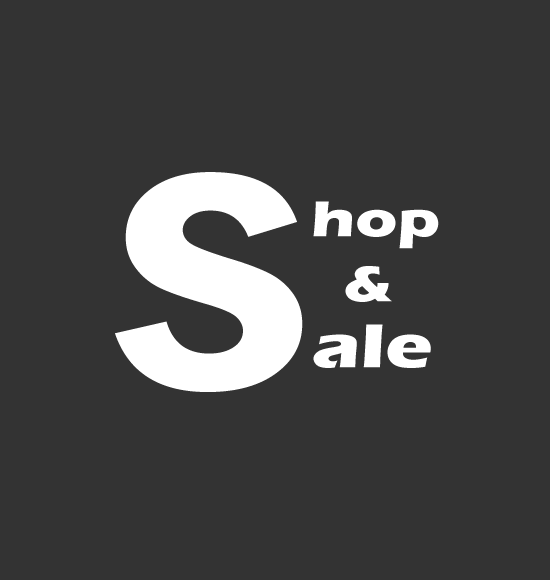
<style>
.page{position:relative;width:550px;height:580px;background:#333333}
.page>*{position:absolute;margin:0}
.t1{font:320px "FranklinGothic-DemiCond";color:#ffffff;scale:1.25 1}
.t2{font:52px "ErasITC-Bold";color:#ffffff;scale:1.25 1}
.t3{font:64px "ErasITC-Bold";color:#ffffff;scale:1.25 1}
</style>
<div class="page">
<p class="t1" style="left:115px;top:172px;width:188px;height:220px">S</p>
<p class="t2" style="left:313px;top:201px;width:126px;height:48px">hop</p>
<p class="t2" style="left:345px;top:266px;width:47px;height:36px">&amp;</p>
<p class="t3" style="left:313px;top:324px;width:118px;height:44px">ale</p>
</div>
